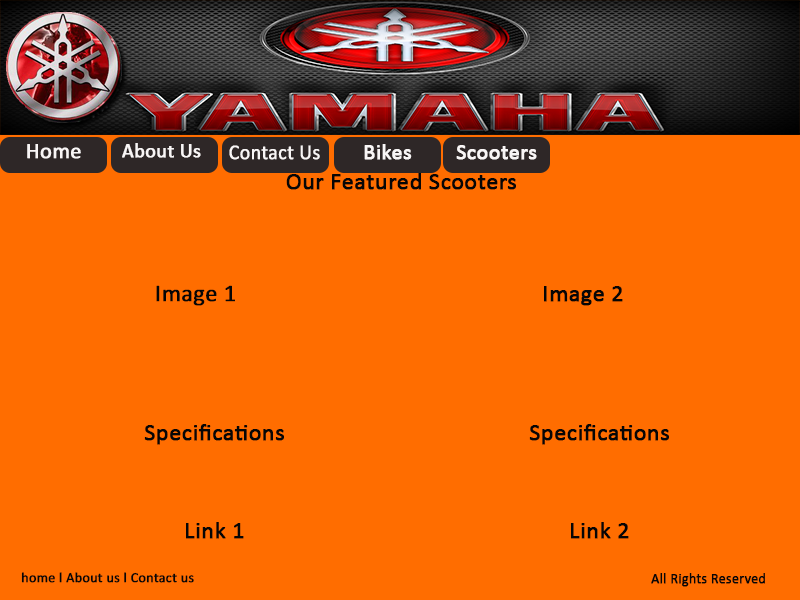
<style>
.page{position:relative;width:800px;height:600px;background:#ff6d00}
.page>*{position:absolute;margin:0}
.t1{font:22px "Calibri";color:#f9f6f6;font-weight:bold}
.t2{font:20px "Calibri";color:#f9f6f6;font-weight:bold}
.t3{font:21.2px "Calibri";color:#f9f6f6;font-weight:bold;scale:0.93 1}
.t4{font:24px "Calibri";color:#060606;font-weight:bold}
.t5{font:24px/14px "Calibri";color:#060606;font-weight:bold}
.t6{font:14.1px "Calibri";color:#070707;font-weight:bold}
.t7{font:14px "Calibri";color:#070707;font-weight:bold}
</style>
<div class="page">
<p class="t1" style="left:27px;top:144px;width:54px;height:15px">Home</p>
<p class="t2" style="left:122px;top:143px;width:79px;height:15px">About Us</p>
<p class="t3" style="left:229px;top:145px;width:91px;height:15px">Contact Us</p>
<p class="t1" style="left:364px;top:144px;width:48px;height:16px">Bikes</p>
<p class="t1" style="left:456px;top:145px;width:81px;height:15px">Scooters</p>
<p class="t4" style="left:286px;top:173px;width:230px;height:17px">Our Featured Scooters</p>
<p class="t4" style="left:156px;top:285px;width:79px;height:21px">Image 1</p>
<p class="t4" style="left:544px;top:286px;width:79px;height:20px">Image 2</p>
<p class="t5" style="left:144px;top:424px;width:140px;height:115px;text-align:center">Specifications<br><br><br><br><br><br><br>Link 1</p>
<p class="t5" style="left:529px;top:424px;width:140px;height:115px;text-align:center">Specifications<br><br><br><br><br><br><br>Link 2</p>
<p class="t6" style="left:21px;top:572px;width:173px;height:11px">home l About us l Contact us</p>
<p class="t7" style="left:651px;top:573px;width:114px;height:14px">All Rights Reserved</p>
</div>
